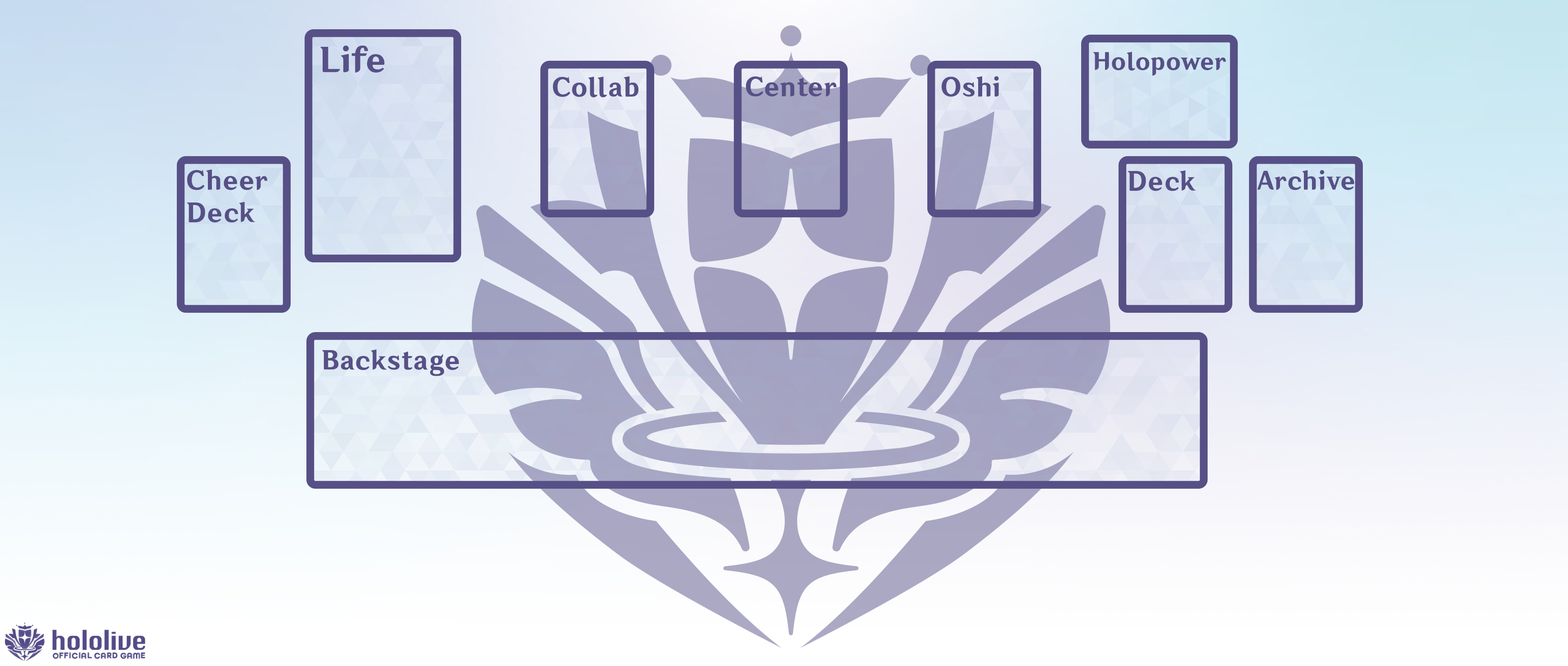
<style>
.page{position:relative;width:1568px;height:666px}
.page>*{position:absolute;margin:0}
.t1{font:32.4px "HYWenHei-HEW";color:#575086}
.t2{font:22.5px "HYWenHei-HEW";color:#575086}
.t3{font:24.7px "HYWenHei-HEW";color:#575086}
.t4{font:24.7px/32.4px "HYWenHei-HEW";color:#575086}
.t5{font:23.8px "HYWenHei-HEW";color:#575086}
</style>
<div class="page">
<p class="t1" style="left:320px;top:45px;width:65px;height:28px">Life</p>
<p class="t2" style="left:1093px;top:52px;width:133px;height:24px">Holopower</p>
<p class="t3" style="left:553px;top:76px;width:85px;height:22px">Collab</p>
<p class="t3" style="left:746px;top:76px;width:90px;height:21px">Center</p>
<p class="t3" style="left:941px;top:76px;width:58px;height:21px">Oshi</p>
<p class="t4" style="left:187px;top:169px;width:80px;height:54px">Cheer<br>Deck</p>
<p class="t3" style="left:1128px;top:170px;width:68px;height:21px">Deck</p>
<p class="t5" style="left:1257px;top:170px;width:97px;height:20px">Archive</p>
<p class="t3" style="left:322px;top:349px;width:137px;height:27px">Backstage</p>
</div>
